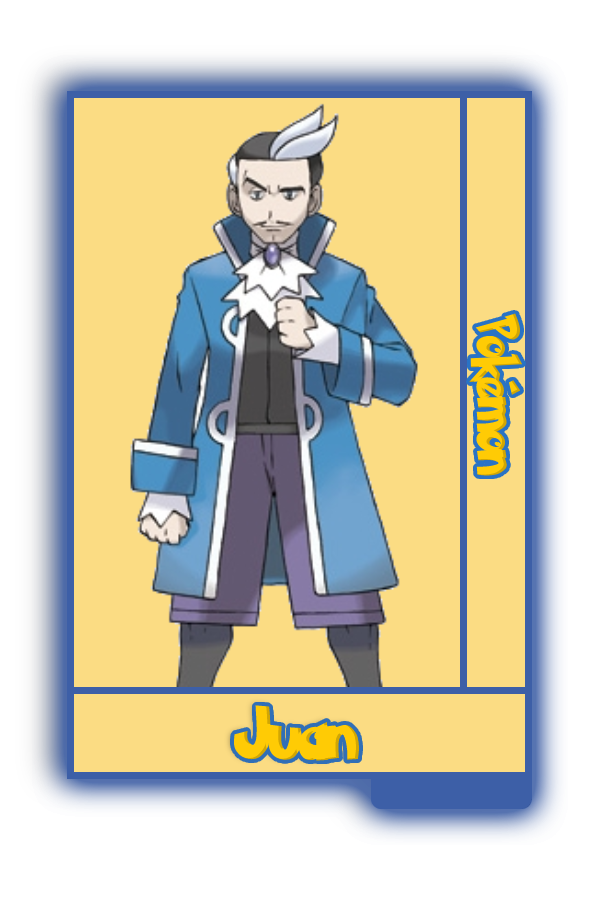
<style>
.page{position:relative;width:600px;height:900px;background:#fbdc83}
.page>*{position:absolute;margin:0}
.t1{font:48.8px "PokemonSolidNormal";color:#ffcb05;scale:0.8 1}
.t2{font:56.6px "PokemonSolidNormal";color:#ffcb05;scale:0.92 1}
</style>
<div class="page">
<p class="t1" style="left:469px;top:313px;width:54px;height:163px;rotate:90deg">Pokémon</p>
<p class="t2" style="left:233px;top:705px;width:127px;height:56px">Juan</p>
</div>
